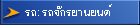
<style>
.page{position:relative;width:140px;height:25px}
.page>*{position:absolute;margin:0}
.t1{font:15.3px "EucrosiaDSE";color:#ffffff;scale:1.12 1}
</style>
<div class="page">
<p class="t1" style="left:25px;top:4px;width:87px;height:12px">Ã¶:Ã¶¨Ñ¡ÃÂÒ¹Â¹µì</p>
</div>
